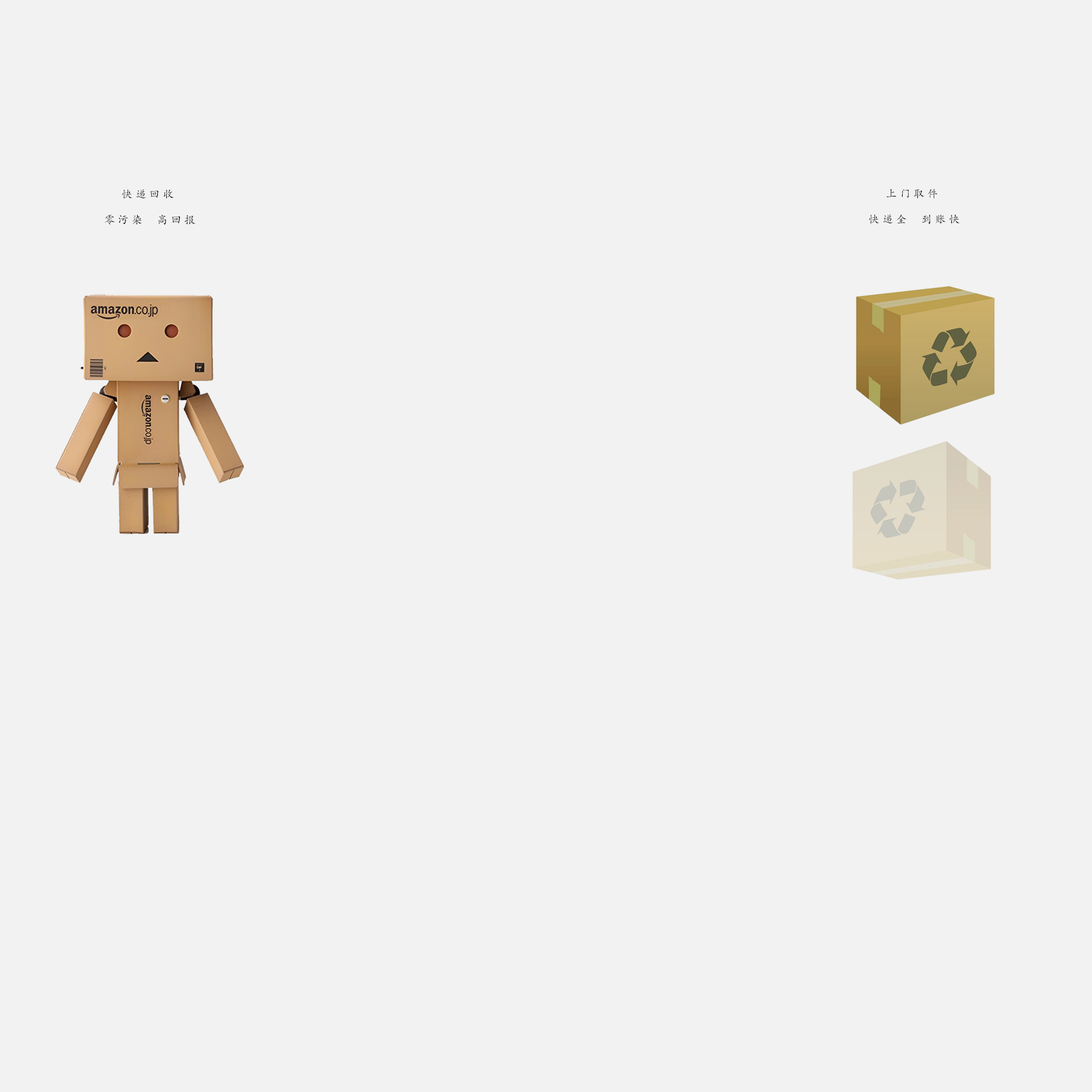
<style>
.page{position:relative;width:1092px;height:1092px;background:#f2f2f2}
.page>*{position:absolute;margin:0}
.t1{font:10.9px/6.4px "AdobeKaitiStd-Regular";letter-spacing:0.26em;color:#000000;text-transform:uppercase}
</style>
<div class="page">
<p class="t1" style="left:104px;top:189px;width:91px;height:36px">快递回收<br><br><br><br>零污染  高回报</p>
<p class="t1" style="left:869px;top:189px;width:91px;height:35px">上门取件<br><br><br><br>快递全  到账快</p>
</div>
